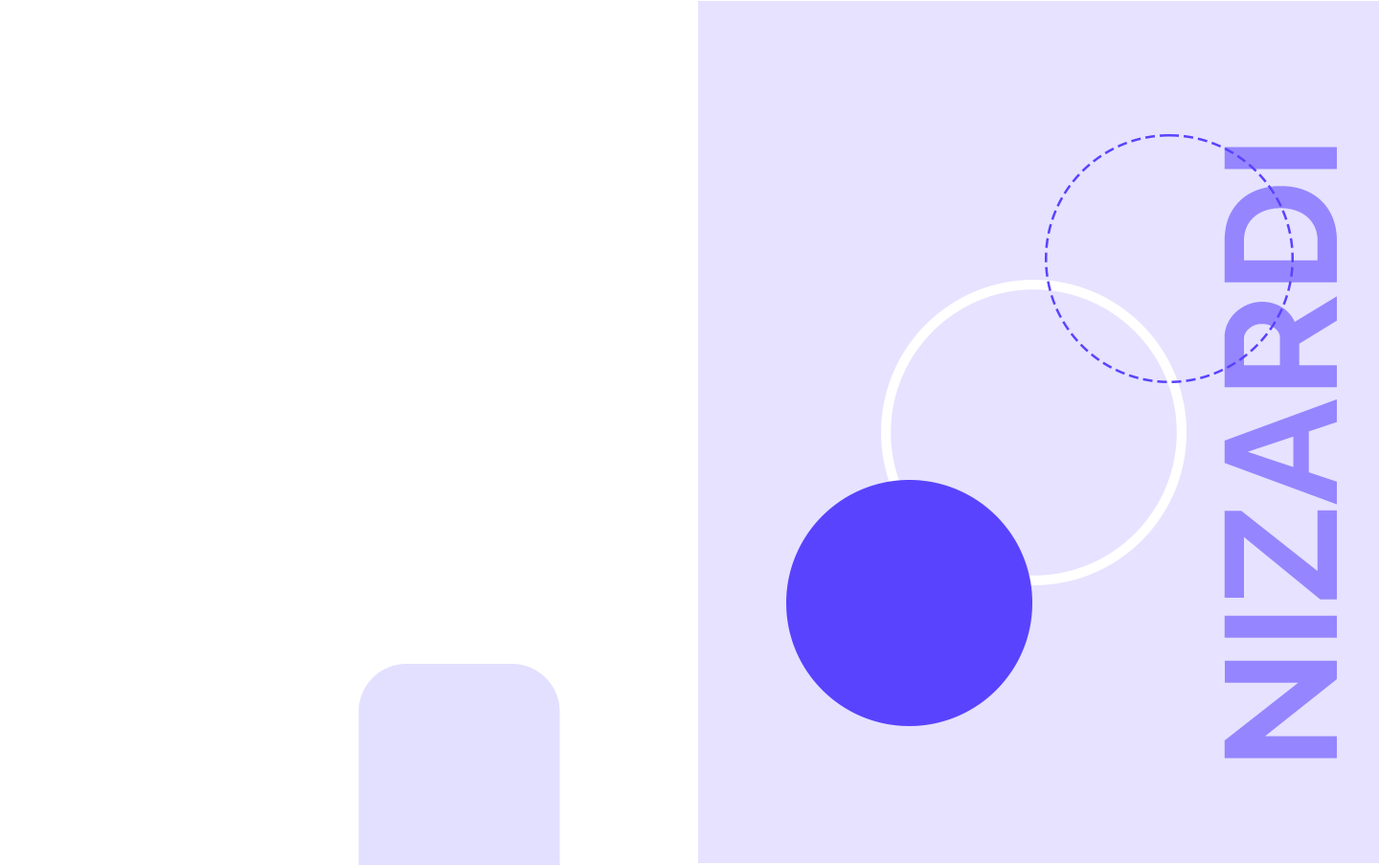
<style>
.page{position:relative;width:1379px;height:865px;background:#ffffff}
.page>*{position:absolute;margin:0}
.t1{font:157.9px "Raleway-Bold";color:#9586ff;text-transform:uppercase}
</style>
<div class="page">
<p class="t1" style="left:1224px;top:147px;width:113px;height:611px;rotate:-90deg">NIZARDI</p>
</div>
